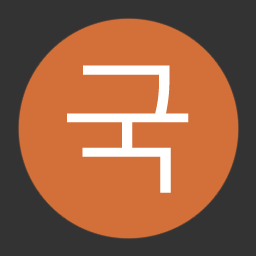
<style>
.page{position:relative;width:256px;height:256px;background:#d36f38}
.page>*{position:absolute;margin:0}
.t1{font:144px "NanumSquareOTFR";color:#ffffff}
</style>
<div class="page">
<p class="t1" style="left:67px;top:65px;width:122px;height:128px">국</p>
</div>
